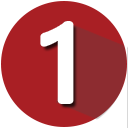
<style>
.page{position:relative;width:128px;height:128px;background:#a91f24}
.page>*{position:absolute;margin:0}
.t1{font:100px "MicrosoftYaHei";color:#ffffff}
</style>
<div class="page">
<p class="t1" style="left:43px;top:24px;width:28px;height:77px">1</p>
</div>
